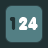
<style>
.page{position:relative;width:48px;height:48px;background:#537f84}
.page>*{position:absolute;margin:0}
.t1{font:18px "Valken";color:#ffffff;scale:0.8 1}
.t2{font:18px "Valken";color:#203133;scale:0.8 1}
</style>
<div class="page">
<p class="t1" style="left:9px;top:17px;width:29px;height:13px"><span class="t2">1</span>24</p>
</div>
